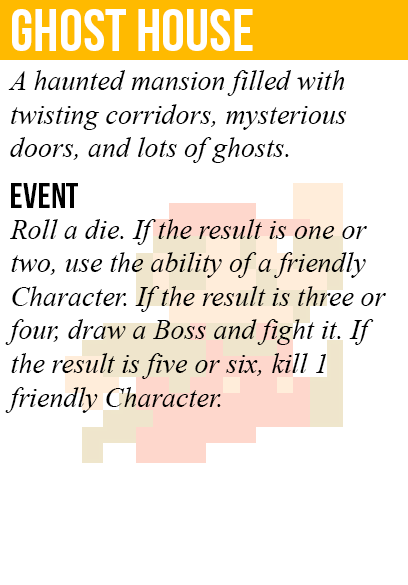
<style>
.page{position:relative;width:408px;height:585px;background:#ffffff}
.page>*{position:absolute;margin:0}
.t1{font:60px "BebasNeue";color:#ffffff}
.t2{font:28px "TimesNewRomanPS-ItalicMT";color:#000000}
.t3{font:36px "BebasNeue";color:#000000}
</style>
<div class="page">
<p class="t1" style="left:12px;top:9px;width:241px;height:42px">ghost house</p>
<p class="t2" style="left:8px;top:70px;width:339px;height:93px">A haunted mansion filled with<br>twisting corridors, mysterious<br>doors, and lots of ghosts.</p>
<p class="t3" style="left:11px;top:183px;width:67px;height:25px">event</p>
<p class="t2" style="left:5px;top:219px;width:381px;height:194px">Roll a die. If the result is one or<br>two, use the ability of a friendly<br>Character. If the result is three or<br>four, draw a Boss and fight it. If<br>the result is five or six, kill 1<br>friendly Character.</p>
</div>
